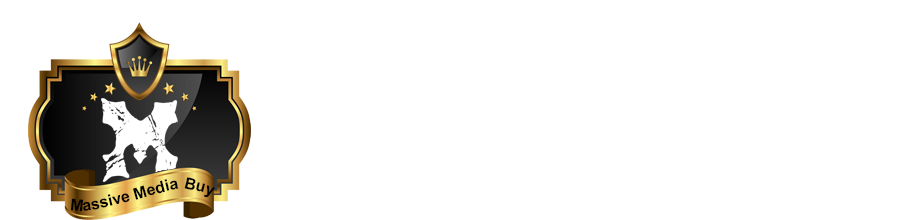
<style>
.page{position:relative;width:900px;height:220px;background:#ffffff}
.page>*{position:absolute;margin:0}
.t1{font:16px "Arial-BoldMT";color:#010101}
</style>
<div class="page">
<p class="t1" style="left:71px;top:177px;width:144px;height:35px">Massive Media Buy</p>
</div>
